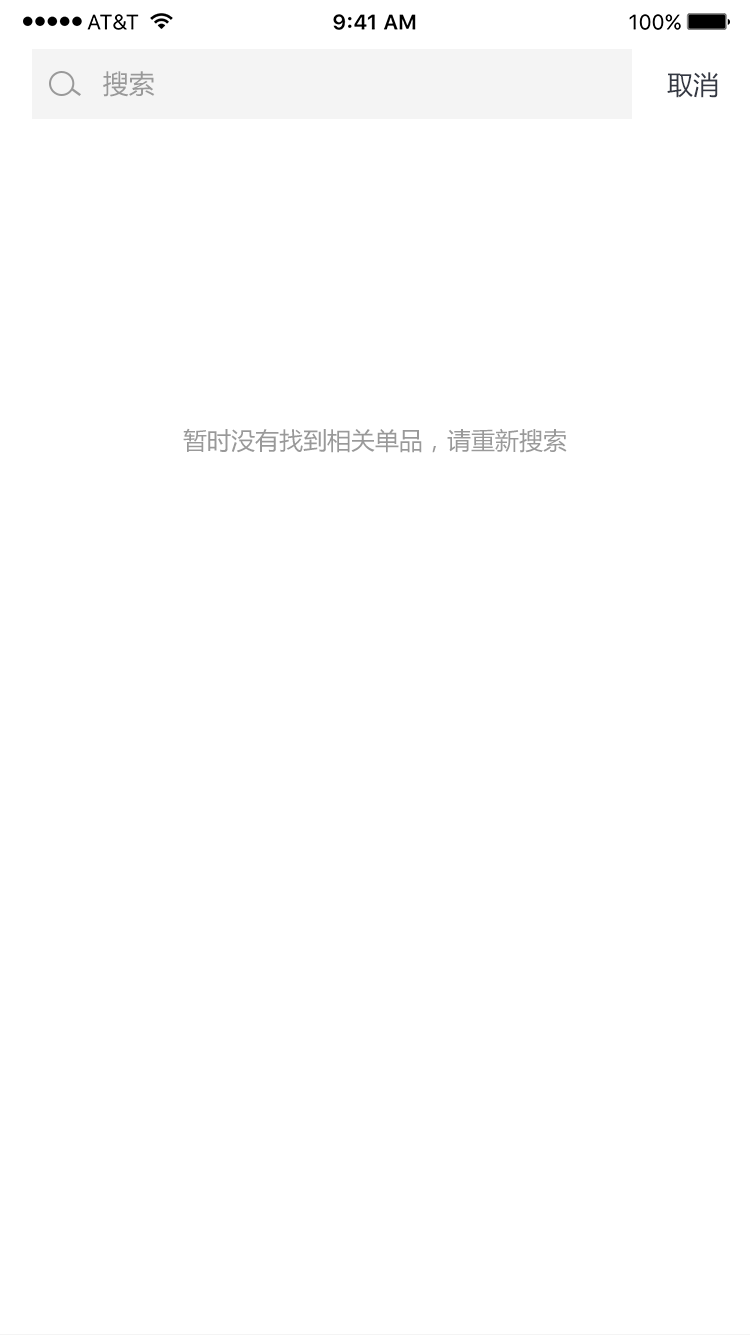
<style>
.page{position:relative;width:750px;height:1335px;background:#ffffff}
.page>*{position:absolute;margin:0}
.t1{font:26px "MicrosoftYaHei";color:#999999}
.t2{font:26px "MicrosoftYaHei";color:#343843}
.t3{font:24px "MicrosoftYaHei";color:#999999}
</style>
<div class="page">
<p class="t1" style="left:103px;top:71px;width:52px;height:26px">搜索</p>
<p class="t2" style="left:667px;top:72px;width:51px;height:26px">取消</p>
<p class="t3" style="left:183px;top:428px;width:384px;height:25px">暂时没有找到相关单品，请重新搜索</p>
</div>
